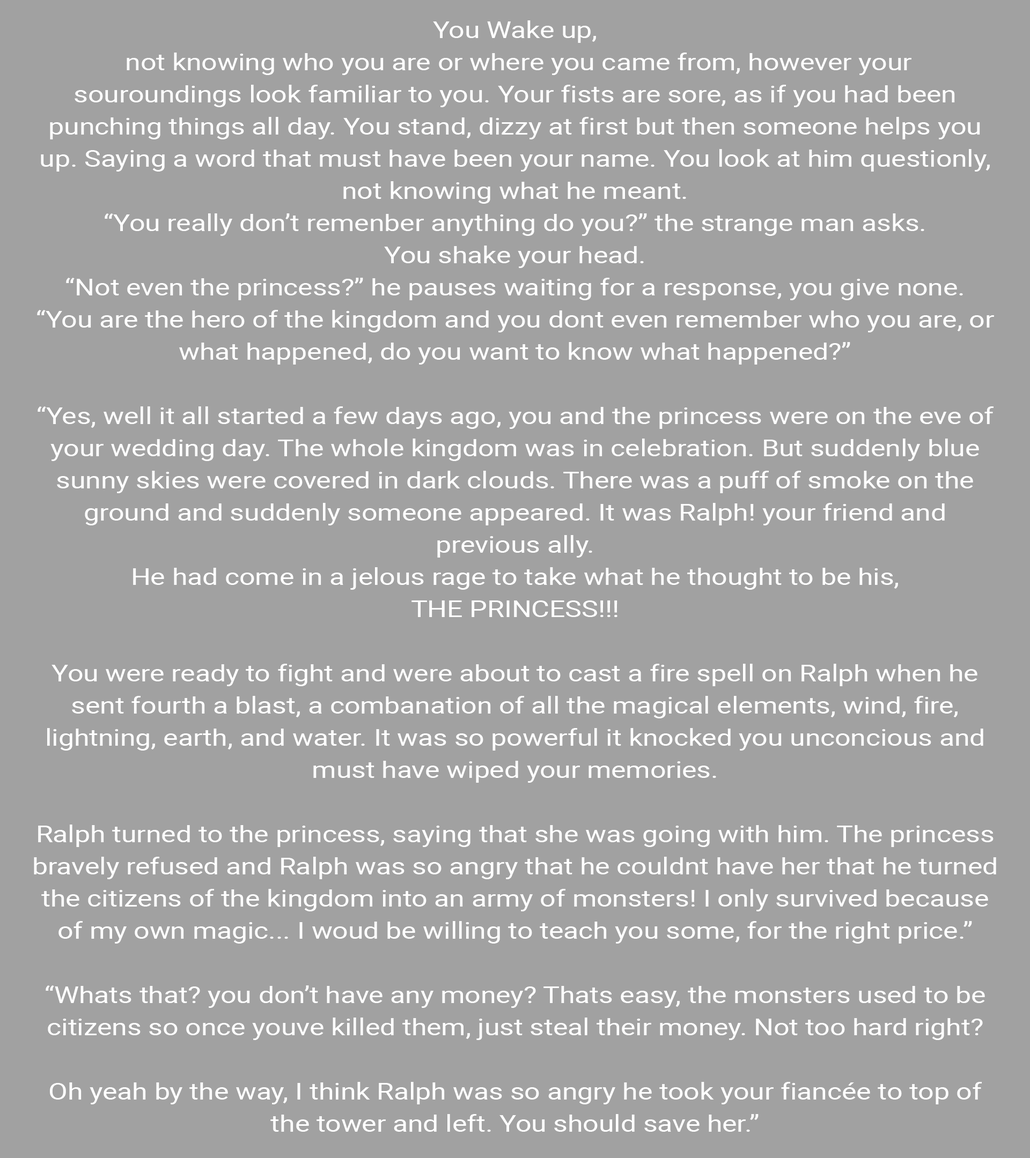
<style>
.page{position:relative;width:1030px;height:1158px;background:#a1a1a1}
.page>*{position:absolute;margin:0}
.t1{font:23.1px/32.2px "Roboto-Regular";color:#ffffff;scale:1.2 1}
</style>
<div class="page">
<p class="t1" style="left:34px;top:20px;width:962px;height:1112px;text-align:center">You Wake up,<br> not knowing who you are or where you came from, however your souroundings look familiar to you. Your fists are sore, as if you had been punching things all day. You stand, dizzy at first but then someone helps you up. Saying a word that must have been your name. You look at him questionly, not knowing what he meant. <br>“You really don’t remenber anything do you?” the strange man asks. <br>You shake your head.<br>“Not even the princess?” he pauses waiting for a response, you give none. <br>“You are the hero of the kingdom and you dont even remember who you are, or what happened, do you want to know what happened?”<br><br>“Yes, well it all started a few days ago, you and the princess were on the eve of your wedding day. The whole kingdom was in celebration. But suddenly blue sunny skies were covered in dark clouds. There was a puff of smoke on the ground and suddenly someone appeared. It was Ralph! your friend and previous ally.<br>He had come in a jelous rage to take what he thought to be his,<br>THE PRINCESS!!! <br><br>You were ready to fight and were about to cast a fire spell on Ralph when he sent fourth a blast, a combanation of all the magical elements, wind, fire, lightning, earth, and water. It was so powerful it knocked you unconcious and must have wiped your memories. <br><br>Ralph turned to the princess, saying that she was going with him. The princess bravely refused and Ralph was so angry that he couldnt have her that he turned the citizens of the kingdom into an army of monsters! I only survived because of my own magic... I woud be willing to teach you some, for the right price.” <br><br>“Whats that? you don’t have any money? Thats easy, the monsters used to be citizens so once youve killed them, just steal their money. Not too hard right?<br><br>Oh yeah by the way, I think Ralph was so angry he took your fiancée to top of the tower and left. You should save her.”</p>
</div>
